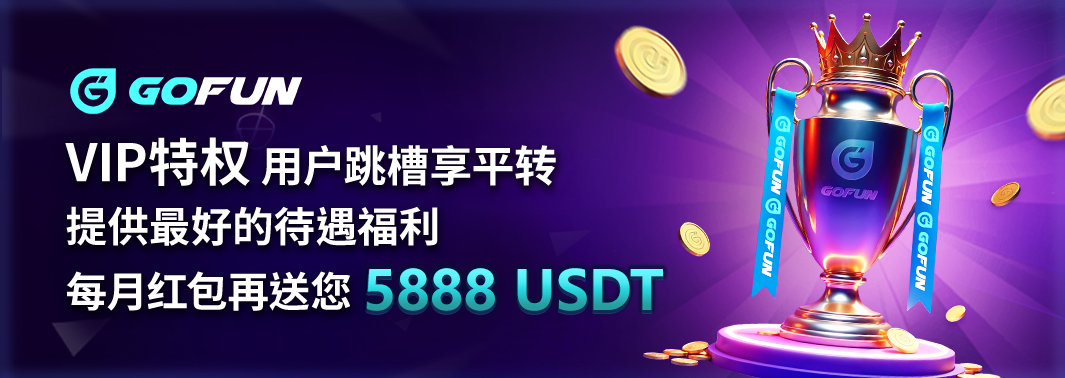
<style>
.page{position:relative;width:1065px;height:378px}
.page>*{position:absolute;margin:0}
.t1{font:51.6px "NotoSansCJKtc-Bold";letter-spacing:-0.01em;color:#ffffff}
.t2{font:43.1px "NotoSansCJKtc-Bold";letter-spacing:-0.01em;color:#ffffff}
.t3{font:41.6px "NotoSansCJKtc-Bold";letter-spacing:-0.01em;color:#ffffff}
</style>
<div class="page">
<p class="t1" style="left:65px;top:137px;width:185px;height:49px">VIP特权</p>
<p class="t2" style="left:261px;top:145px;width:295px;height:41px">用户跳槽享平转</p>
<p class="t3" style="left:66px;top:206px;width:372px;height:40px">提供最好的待遇福利</p>
<p class="t3" style="left:66px;top:271px;width:284px;height:40px">每月红包再送您</p>
</div>
